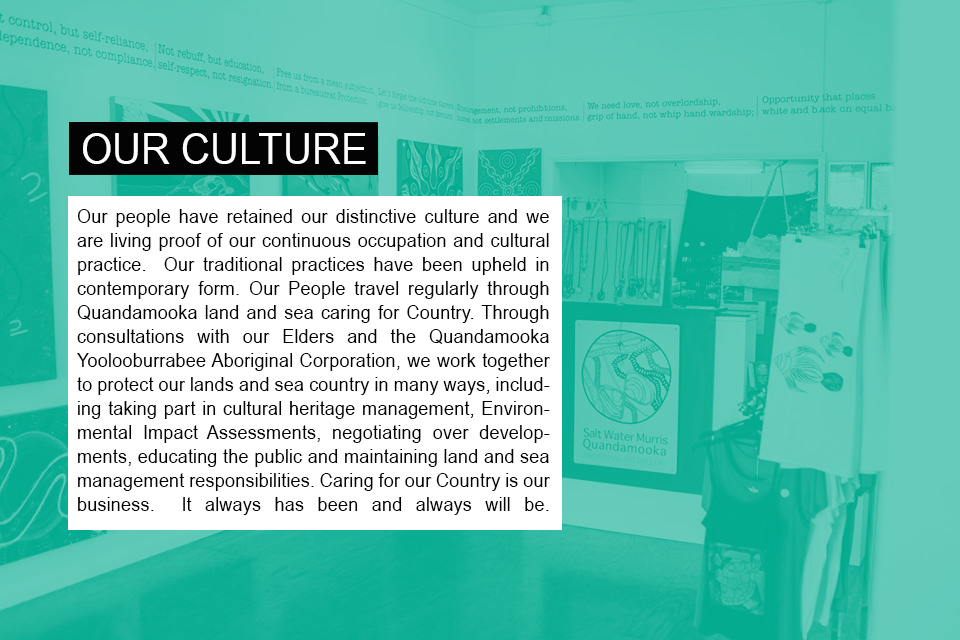
<style>
.page{position:relative;width:960px;height:640px;background:#ffffff}
.page>*{position:absolute;margin:0}
.t1{font:43.2px "ArialNarrow";color:#fffefe;scale:1.13 1}
.t2{font:19.8px/24px "ArialNarrow";color:#000000;scale:1.13 1}
</style>
<div class="page">
<p class="t1" style="left:83px;top:133px;width:283px;height:31px">OUR CULTURE</p>
<p class="t2" style="left:77px;top:209px;width:473px;height:306px;text-align:justify">Our people have retained our distinctive culture and we are living proof of our continuous occupation and cultural practice.  Our traditional practices have been upheld in contemporary form. Our People travel regularly through Quandamooka land and sea caring for Country. Through consultations with our Elders and the Quandamooka Yoolooburrabee Aboriginal Corporation, we work together to protect our lands and sea country in many ways, including taking part in cultural heritage management, Environmental Impact Assessments, negotiating over developments, educating the public and maintaining land and sea management responsibilities. Caring for our Country is our business.  It always has been and always will be.</p>
</div>
